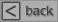
<style>
.page{position:relative;width:58px;height:22px}
.page>*{position:absolute;margin:0}
.t1{font:20.7px "Verdana";color:#3c3b3b;scale:0.87 1}
.t2{font:13px "LaudatioC";color:#3c3b3b}
</style>
<div class="page">
<p class="t1" style="left:5px;top:5px;width:11px;height:12px;rotate:180deg">&gt;</p>
<p class="t2" style="left:25px;top:5px;width:29px;height:11px">back</p>
</div>
